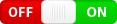
<style>
.page{position:relative;width:117px;height:24px}
.page>*{position:absolute;margin:0}
.t1{font:14px "MyriadPro-Bold";color:#ffffff}
</style>
<div class="page">
<p class="t1" style="left:8px;top:7px;width:25px;height:10px">OFF</p>
<p class="t1" style="left:87px;top:7px;width:19px;height:10px">ON</p>
</div>
